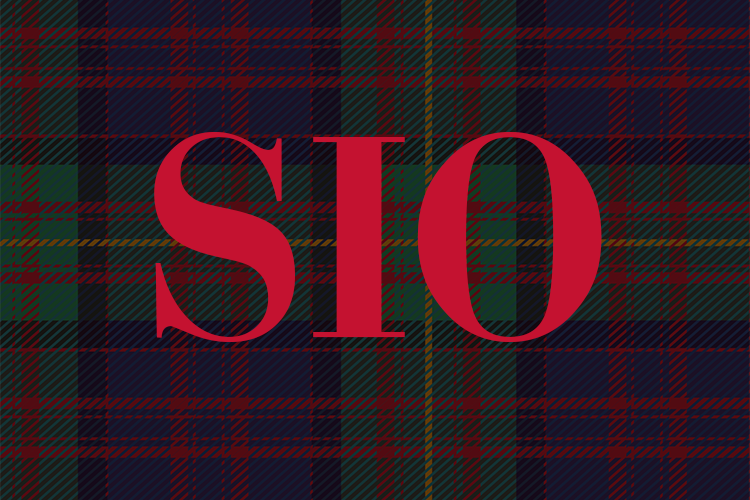
<style>
.page{position:relative;width:750px;height:500px}
.page>*{position:absolute;margin:0}
.t1{font:300px "BauerBodoniBT-Bold";color:#c41230}
</style>
<div class="page">
<p class="t1" style="left:154px;top:132px;width:448px;height:210px">SIO</p>
</div>
